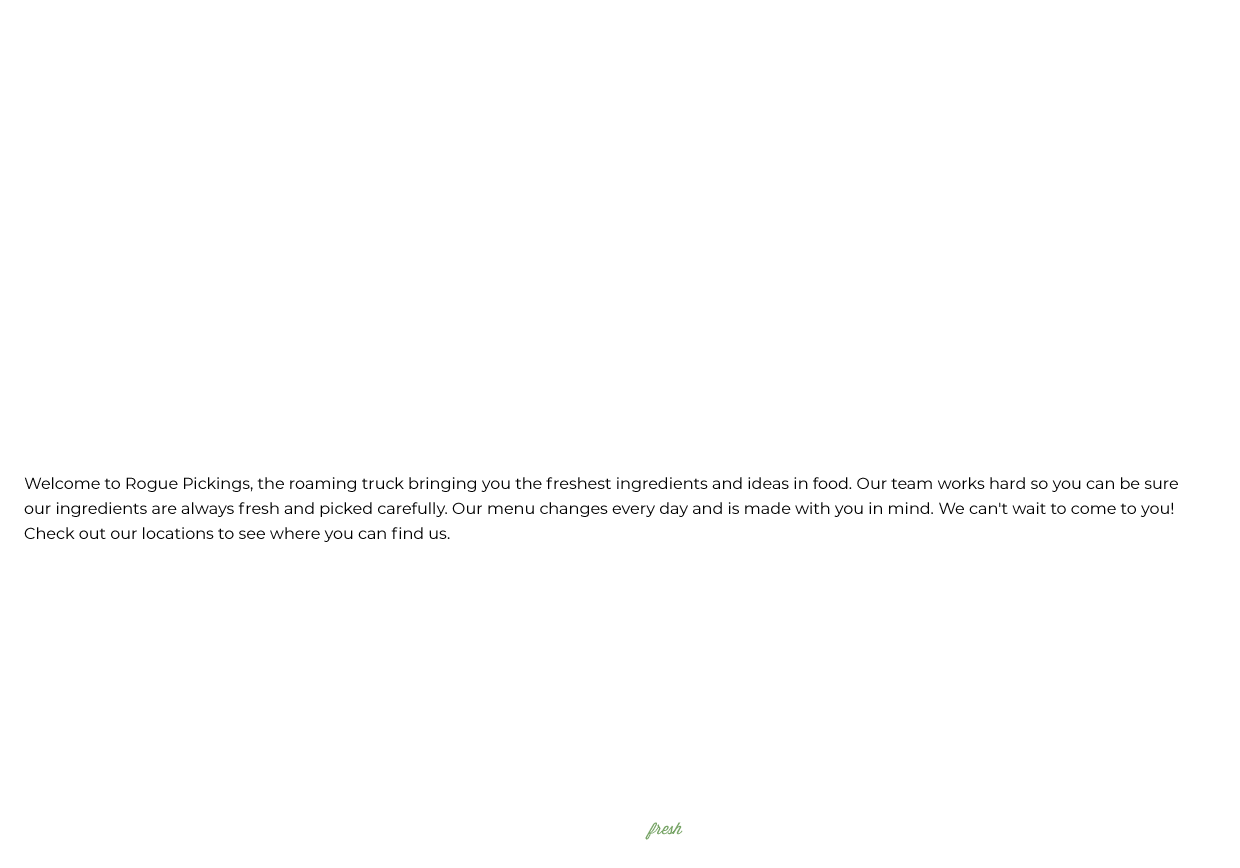
<style>
.page{position:relative;width:1240px;height:868px;background:#ffffff}
.page>*{position:absolute;margin:0}
.t1{font:16px/25px "Montserrat-Regular";color:#000000}
.t2{font:16px "Wisdom-Script";color:#77a466}
</style>
<div class="page">
<p class="t1" style="left:24px;top:477px;width:1154px;height:65px">Welcome to Rogue Pickings, the roaming truck bringing you the freshest ingredients and ideas in food. Our team works hard so you can be sure our ingredients are always fresh and picked carefully. Our menu changes every day and is made with you in mind. We can't wait to come to you! Check out our locations to see where you can find us.</p>
<p class="t2" style="left:645px;top:822px;width:38px;height:18px">fresh</p>
</div>
